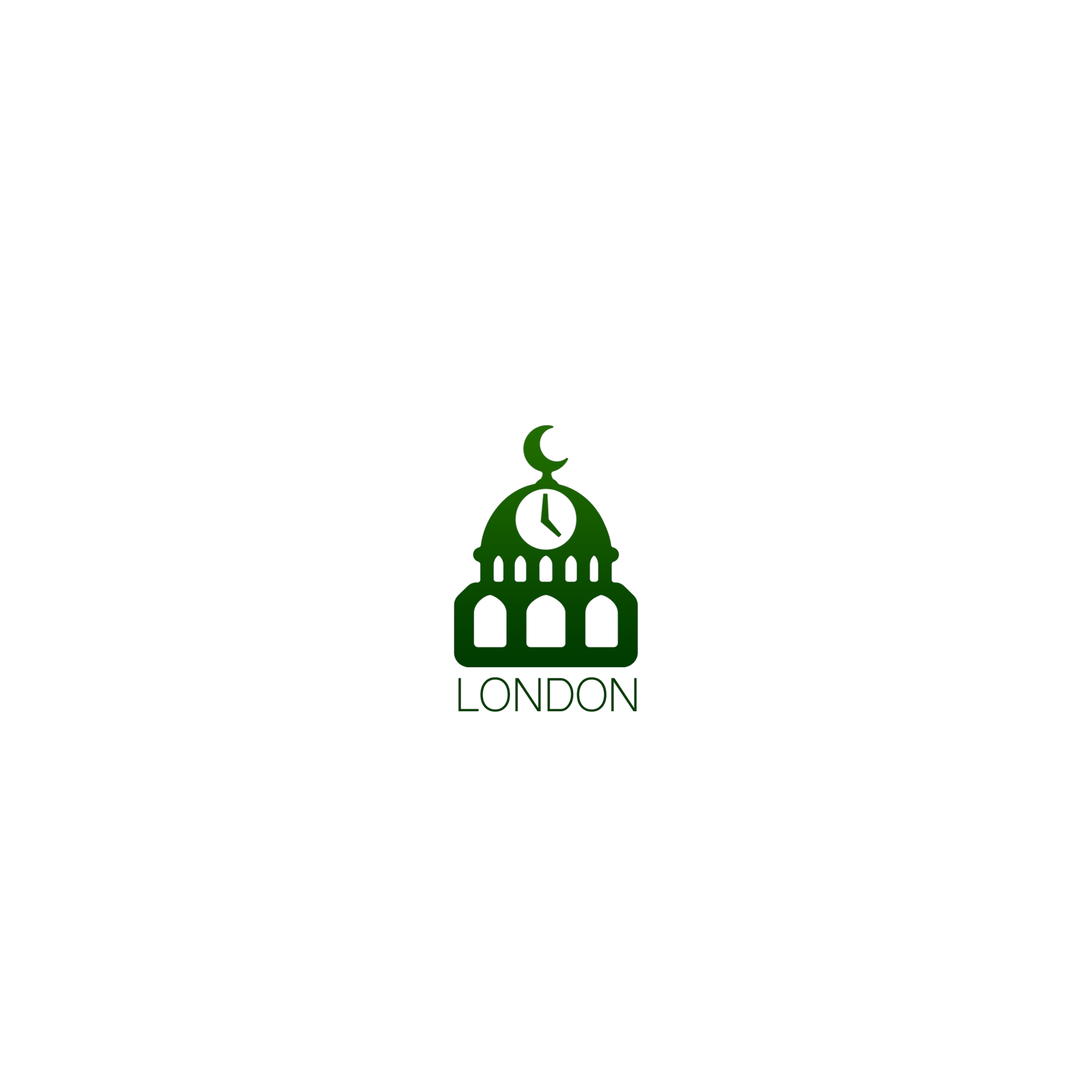
<style>
.page{position:relative;width:1092px;height:1092px;background:#ffffff}
.page>*{position:absolute;margin:0}
.t1{font:44.8px "ShreeDev0714";color:#013e00}
</style>
<div class="page">
<p class="t1" style="left:458px;top:677px;width:178px;height:35px">LONDON</p>
</div>
